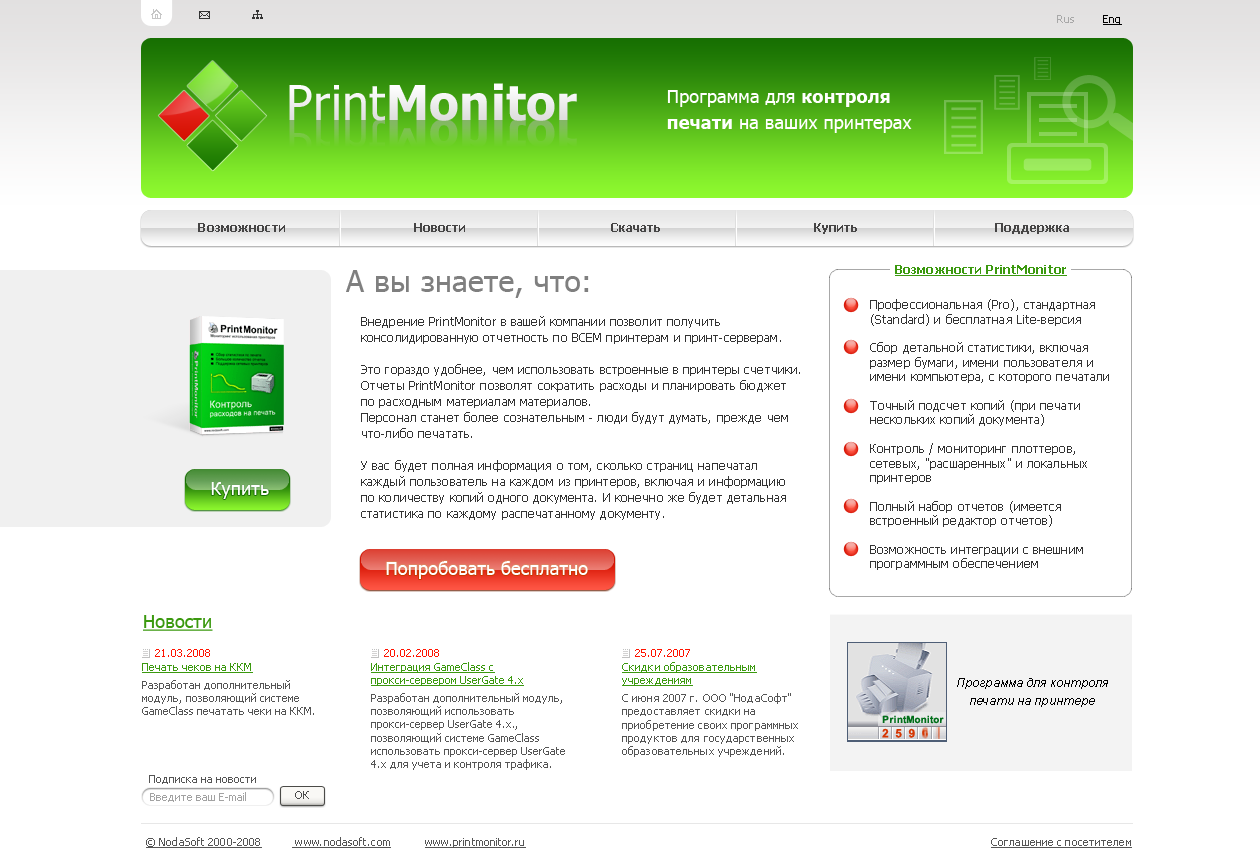
<style>
.page{position:relative;width:1260px;height:868px;background:#ffffff}
.page>*{position:absolute;margin:0}
.t1{font:11px "Tahoma";letter-spacing:0.01em;color:#a8a8a8}
.t2{font:11px "Tahoma";letter-spacing:0.01em;color:#000000;text-decoration:underline}
.t3{font:18px/26px "Tahoma";letter-spacing:0.01em;color:#ffffff}
.t4{font:18px/26px "Tahoma-Bold";letter-spacing:0.01em;color:#ffffff}
.t5{font:12px "Tahoma-Bold";letter-spacing:0.01em;color:#464545}
.t6{font:30px "Tahoma";letter-spacing:0.01em;color:#7f7f7f}
.t7{font:12px "Tahoma-Bold";letter-spacing:0.01em;color:#3b990f;text-decoration:underline}
.t8{font:12px "Tahoma";letter-spacing:0.01em;color:#333333}
.t9{font:12px/16px "Tahoma";letter-spacing:0.01em;color:#333333}
.t10{font:18px "Tahoma";letter-spacing:0.01em;color:#ffffff}
.t11{font:18px "Tahoma";letter-spacing:0.01em;color:#3b990f;text-decoration:underline}
.t12{font:11px "Tahoma";color:#555555}
.t13{font:11px "Tahoma";color:#ff1300}
.t14{font:11px/14px "Tahoma";color:#3b990f;text-decoration:underline}
.t15{font:11px "Tahoma";color:#3b990f;text-decoration:underline}
.t16{font:11px/18px "Tahoma";color:#555555}
.t17{font:11px/14px "Tahoma";color:#ff1300}
.t18{font:11px "Tahoma";letter-spacing:0.01em;color:#555555}
.t19{font:11px/14px "Tahoma";letter-spacing:0.01em;color:#ff1300}
.t20{font:11px/14px "Tahoma";letter-spacing:0.01em;color:#3b990f;text-decoration:underline}
.t21{font:11px "Tahoma";letter-spacing:0.01em;color:#3b990f;text-decoration:underline}
.t22{font:11px/18px "Tahoma";letter-spacing:0.01em;color:#555555}
.t23{font:11px "Tahoma";color:#a2a2a2}
.t24{font:11px "Tahoma";letter-spacing:0.01em;color:#555555;text-decoration:underline}
</style>
<div class="page">
<p class="t1" style="left:1057px;top:15px;width:65px;height:10px">Rus         <span class="t2">Eng</span></p>
<p class="t3" style="left:667px;top:90px;width:245px;height:43px">Программа для <span class="t4">контроля <br>печати</span> на ваших принтерах</p>
<p class="t5" style="left:198px;top:223px;width:871px;height:11px">Возможности                               Новости                                   Скачать                                     Купить                                 Поддержка</p>
<p class="t6" style="left:346px;top:270px;width:243px;height:28px">А вы знаете, что:</p>
<p class="t7" style="left:895px;top:265px;width:172px;height:11px">Возможности PrintMonitor</p>
<p class="t8" style="left:870px;top:299px;width:239px;height:271px">Профессиональная (Pro), стандартная (Standard) и бесплатная Lite-версия<br><br>Сбор детальной статистики, включая размер бумаги, имени пользователя и имени компьютера, с которого печатали<br><br>Точный подсчет копий (при печати нескольких копий документа)<br><br>Контроль / мониторинг плоттеров, сетевых, "расшаренных" и локальных принтеров<br><br>Полный набор отчетов (имеется встроенный редактор отчетов)<br><br>Возможность интеграции с внешним программным обеспечением</p>
<p class="t9" style="left:361px;top:316px;width:439px;height:204px">Внедрение PrintMonitor в вашей компании позволит получить консолидированную отчетность по ВСЕМ принтерам и принт-серверам. <br><br>Это гораздо удобнее, чем использовать встроенные в принтеры счетчики. Отчеты PrintMonitor позволят сократить расходы и планировать бюджет по расходным материалам материалов.<br>Персонал станет более сознательным - люди будут думать, прежде чем что-либо печатать.<br><br>У вас будет полная информация о том, сколько страниц напечатал каждый пользователь на каждом из принтеров, включая и информацию по количеству копий одного документа. И конечно же будет детальная статистика по каждому распечатанному документу.</p>
<p class="t10" style="left:211px;top:482px;width:58px;height:17px">Купить</p>
<p class="t10" style="left:386px;top:561px;width:202px;height:18px">Попробовать бесплатно</p>
<p class="t11" style="left:143px;top:615px;width:70px;height:16px">Новости</p>
<p class="t12" style="left:142px;top:649px;width:172px;height:66px"><span class="t13">21.03.2008<br></span><span class="t14">Печать чеков </span><span class="t15">на ККМ<br></span><span class="t16">Разработан дополните</span>льный модуль, позволяющий системе GameClass печатать чеки на ККМ.</p>
<p class="t12" style="left:371px;top:649px;width:194px;height:121px"><span class="t17">20.02.2008 <br></span><span class="t14">Интеграция</span><span class="t15"> GameClass с прокси-сервером UserGate 4.x<br></span><span class="t16">Разработан </span>дополнительный модуль, позволяющий использовать прокси-сервер UserGate 4.x., позволяющий системе GameClass использовать прокси-сервер UserGate 4.x для учета и контроля трафика.</p>
<p class="t18" style="left:622px;top:649px;width:176px;height:108px"><span class="t19">25.07.2007 <br></span><span class="t20">Скидки обра</span><span class="t21">зовательным учреждениям<br></span><span class="t22">С июня 2007 г. О</span>ОО "НодаСофт" предоставляет скидки на приобретение своих программных продуктов для государственных образовательных учреждений.</p>
<p class="t12" style="left:149px;top:775px;width:107px;height:9px">Подписка на новости</p>
<p class="t23" style="left:150px;top:792px;width:96px;height:10px">Введите ваш E-mail</p>
<p class="t24" style="left:146px;top:837px;width:380px;height:11px">© NodaSoft 2000-2008           www.nodasoft.com           www.printmonitor.ru</p>
<p class="t24" style="left:991px;top:838px;width:141px;height:10px">Соглашение с посетителем</p>
</div>
